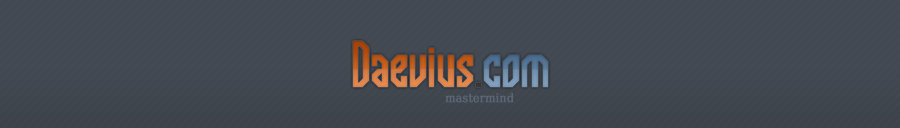
<style>
.page{position:relative;width:900px;height:128px;background:#434952}
.page>*{position:absolute;margin:0}
.t1{font:72px "SupraGeniusLinesBRK";font-weight:bold}
.t2{font:12px "DejaVuSerifCondensed";color:#5b6674;font-weight:bold}
</style>
<div class="page">
<p class="t1" style="left:353px;top:41px;width:195px;height:46px">Daevius.com</p>
<p class="t2" style="left:445px;top:93px;width:69px;height:10px">mastermind</p>
</div>
